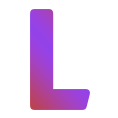
<style>
.page{position:relative;width:118px;height:118px;background:#ffffff}
.page>*{position:absolute;margin:0}
.t1{font:141.8px "OfficinaSansStd-Bold";letter-spacing:-0.02em;font-weight:bold}
</style>
<div class="page">
<p class="t1" style="left:30px;top:9px;width:60px;height:101px">L</p>
</div>
